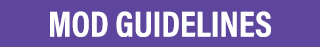
<style>
.page{position:relative;width:320px;height:47px;background:#5e469f}
.page>*{position:absolute;margin:0}
.t1{font:36.3px "AcuminProCond-Bold";color:#ffffff;text-transform:uppercase}
</style>
<div class="page">
<p class="t1" style="left:50px;top:11px;width:221px;height:26px">Mod Guidelines</p>
</div>
